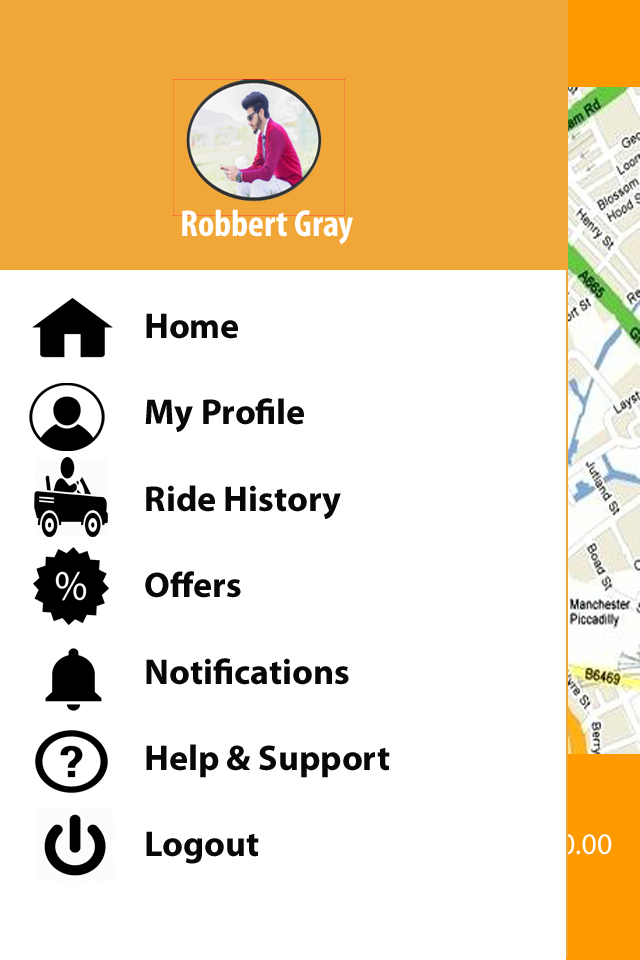
<style>
.page{position:relative;width:640px;height:960px;background:#ffffff}
.page>*{position:absolute;margin:0}
.t1{font:38px "MyriadPro-BoldCond";color:#ffffff}
.t2{font:36px "MyriadPro-Bold";color:#080808}
</style>
<div class="page">
<p class="t1" style="left:182px;top:209px;width:171px;height:36px">Robbert Gray</p>
<p class="t2" style="left:145px;top:313px;width:245px;height:551px">Home<br><br>My Profile<br><br>Ride History<br><br>Offers<br><br>Notifications<br><br>Help &amp; Support<br><br>Logout</p>
</div>
